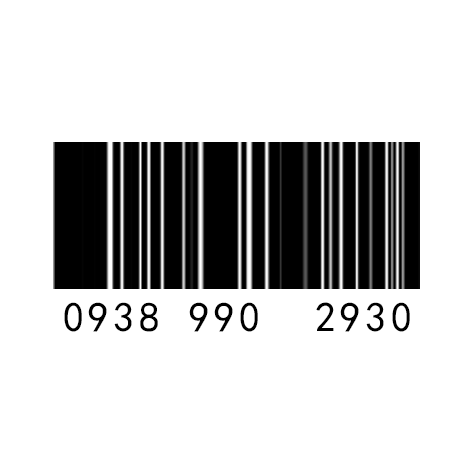
<style>
.page{position:relative;width:474px;height:474px;background:#ffffff}
.page>*{position:absolute;margin:0}
.t1{font:42px "SimHei";letter-spacing:0.1em;color:#000000}
</style>
<div class="page">
<p class="t1" style="left:64px;top:302px;width:346px;height:30px">0938 990  2930</p>
</div>
